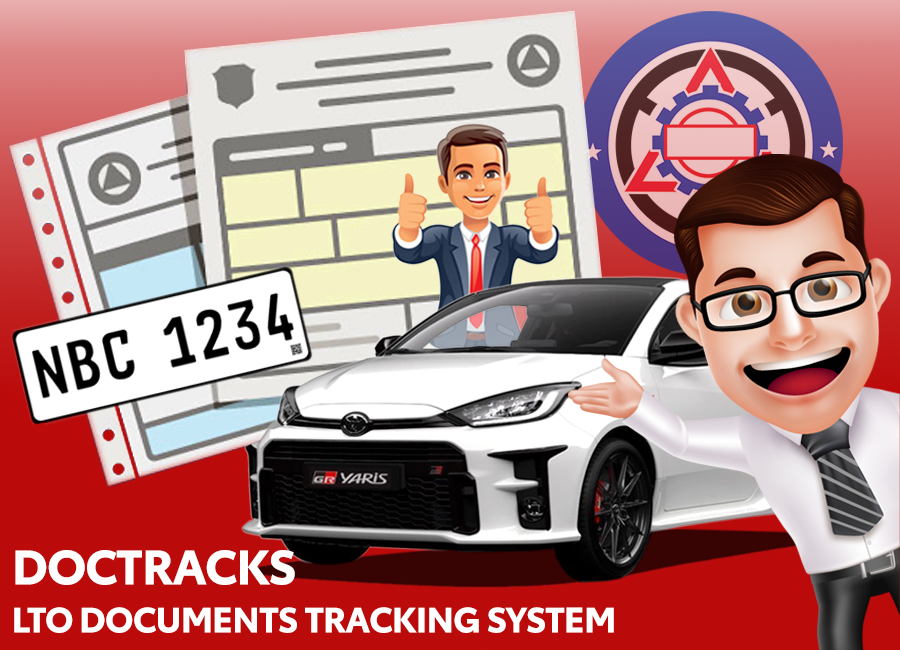
<style>
.page{position:relative;width:900px;height:650px}
.page>*{position:absolute;margin:0}
.t1{font:48px "ToyotaType-Bold";letter-spacing:-0.02em;color:#ffffff}
.t2{font:35px "ToyotaType-Bold";letter-spacing:-0.02em;color:#ffffff}
</style>
<div class="page">
<p class="t1" style="left:15px;top:550px;width:280px;height:35px">DOCTRACKS</p>
<p class="t2" style="left:14px;top:607px;width:600px;height:26px">LTO DOCUMENTS TRACKING SYSTEM</p>
</div>
